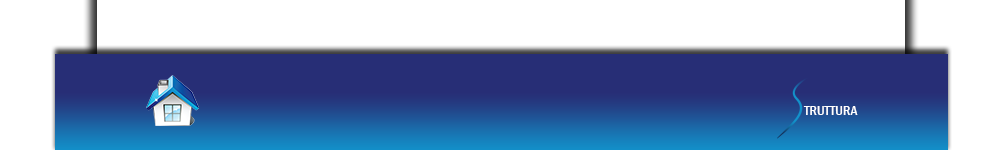
<style>
.page{position:relative;width:1000px;height:150px;background:#ffffff}
.page>*{position:absolute;margin:0}
.t1{font:14.2px "FranklinGothic-MediumCond";color:#ffffff}
</style>
<div class="page">
<p class="t1" style="left:803px;top:106px;width:55px;height:9px">TRUTTURA</p>
</div>
